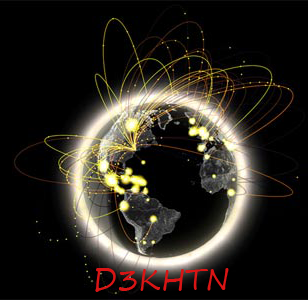
<style>
.page{position:relative;width:308px;height:300px;background:#000000}
.page>*{position:absolute;margin:0}
.t1{font:30px "SegoePrint";color:#da1515}
</style>
<div class="page">
<p class="t1" style="left:95px;top:268px;width:134px;height:24px">D3KHTN</p>
</div>
